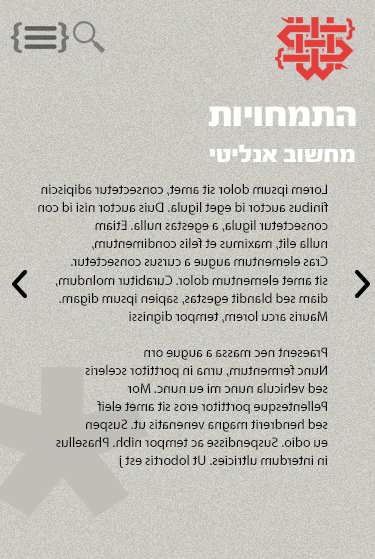
<style>
.page{position:relative;width:375px;height:559px}
.page>*{position:absolute;margin:0}
.t1{font:37.2px "FbScorpion-Black";color:#ffffff}
.t2{font:25px "FbScorpion-Black";color:#ffffff}
.t3{font:13.9px/18px "MyriadHebrew-Regular";color:#080808}
</style>
<div class="page">
<p class="t1" style="left:208px;top:106px;width:148px;height:21px">תויוחמתה</p>
<p class="t2" style="left:210px;top:144px;width:145px;height:18px">יטילנא בושחמ</p>
<p class="t3" style="left:38px;top:184px;width:290px;height:284px;rotate:180deg">Lorem ipsum dolor sit amet, consectetur adipiscin<br>finibus auctor id eget ligula. Duis auctor nisi id con <br>consectetur ligula, a egestas nulla. Etiam  <br>nulla elit, maximus et felis condimentum, <br>Cras elementum augue a cursus consectetur.<br>sit amet elementum dolor. Curabitur molndum, <br>diam sed blandit egestas, sapien ipsum digam. <br>Mauris arcu lorem, tempor dignissi<br><br>Praesent nec massa a augue orn<br>Nunc fermentum, urna in porttitor sceleris<br>sed vehicula nunc mi eu nunc. Mor<br>Pellentesque porttitor eros sit amet eleif <br>sed hendrerit magna venenatis ut. Suspen <br>eu odio. Suspendisse ac tempor nibh. Phasellus <br>in interdum ultricies. Ut lobortis est j</p>
</div>
